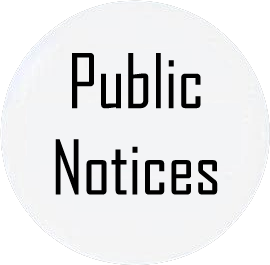
<style>
.page{position:relative;width:270px;height:265px;background:#f3f4f6}
.page>*{position:absolute;margin:0}
.t1{font:72px "AgencyFB-Reg";color:#000000}
</style>
<div class="page">
<p class="t1" style="left:55px;top:53px;width:163px;height:142px;text-align:center">Public Notices</p>
</div>
